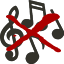
<style>
.page{position:relative;width:64px;height:64px;background:#ffffff}
.page>*{position:absolute;margin:0}
.t1{font:104.5px "Chiller-Regular";color:#ab0000;scale:1.84 1}
</style>
<div class="page">
<p class="t1" style="left:6px;top:13px;width:55px;height:40px">x</p>
</div>
